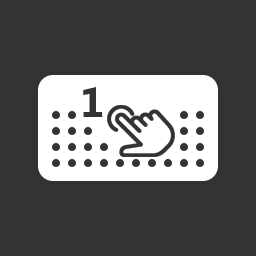
<style>
.page{position:relative;width:256px;height:256px;background:#333333}
.page>*{position:absolute;margin:0}
.t1{font:41.7px "MicrosoftNewTaiLue-Bold";color:#333333}
</style>
<div class="page">
<p class="t1" style="left:83px;top:87px;width:20px;height:30px">1</p>
</div>
